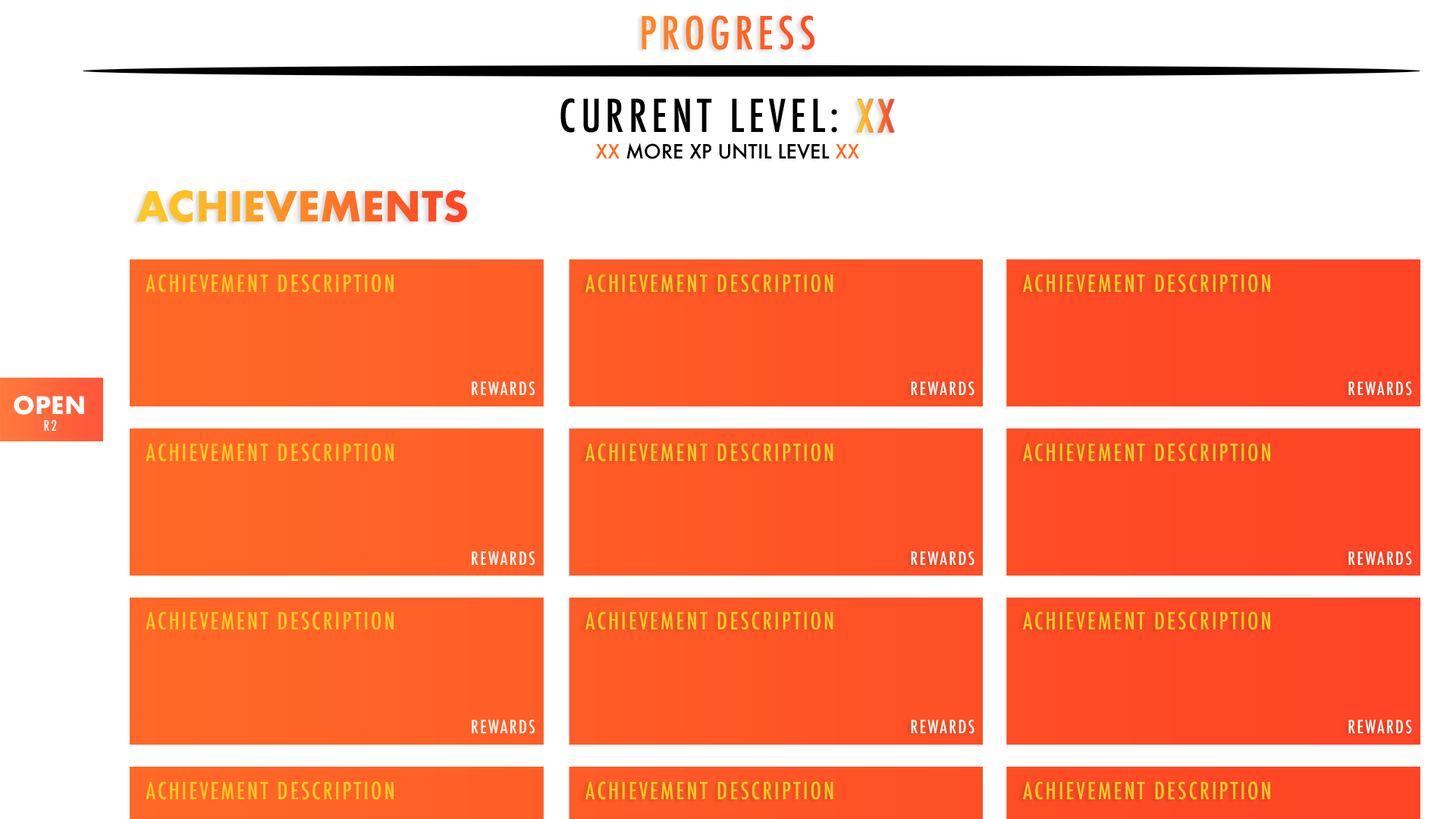
<style>
.page{position:relative;width:1456px;height:819px;background:#ffffff}
.page>*{position:absolute;margin:0}
.t1{font:44.2px "Futura-CondensedMedium";letter-spacing:0.1em}
.t2{font:44px "Futura-CondensedMedium";letter-spacing:0.1em;color:#000000}
.t3{font:44px "Futura-CondensedMedium";letter-spacing:0.1em;color:#939598}
.t4{font:44px "Futura-CondensedMedium";letter-spacing:0.1em}
.t5{font:19.1px "Futura-Medium";color:#000000}
.t6{font:19.1px "Futura-Medium";color:#ff6926}
.t7{font:19.1px "Futura-Medium";color:#ff6a27}
.t8{font:40.2px "Futura-Bold"}
.t9{font:23.1px "Futura-CondensedMedium";letter-spacing:0.1em;color:#ffca27}
.t10{font:17.8px "Futura-CondensedMedium";letter-spacing:0.1em;color:#ffffff}
.t11{font:23.6px "Futura-Bold";color:#ffffff}
.t12{font:14.1px "Futura-CondensedMedium";letter-spacing:0.1em;color:#ffffff}
</style>
<div class="page">
<p class="t1" style="left:642px;top:15px;width:173px;height:35px">PROGRESS</p>
<p class="t2" style="left:560px;top:98px;width:335px;height:35px">CURRENT LEVEL: <span class="t3">XX</span></p>
<p class="t4" style="left:857px;top:99px;width:37px;height:34px">XX</p>
<p class="t5" style="left:595px;top:143px;width:264px;height:17px"><span class="t6">XX</span> MORE XP UNTIL LEVEL <span class="t7">XX</span></p>
<p class="t8" style="left:136px;top:190px;width:331px;height:32px">ACHIEVEMENTS</p>
<p class="t9" style="left:146px;top:274px;width:248px;height:19px">ACHIEVEMENT DESCRIPTION</p>
<p class="t9" style="left:585px;top:274px;width:248px;height:19px">ACHIEVEMENT DESCRIPTION</p>
<p class="t9" style="left:1023px;top:274px;width:247px;height:19px">ACHIEVEMENT DESCRIPTION</p>
<p class="t10" style="left:472px;top:381px;width:63px;height:15px">REWARDS</p>
<p class="t10" style="left:911px;top:381px;width:63px;height:15px">REWARDS</p>
<p class="t10" style="left:1348px;top:381px;width:64px;height:15px">REWARDS</p>
<p class="t11" style="left:14px;top:396px;width:70px;height:19px">OPEN</p>
<p class="t12" style="left:44px;top:419px;width:13px;height:12px">R2</p>
<p class="t9" style="left:146px;top:443px;width:248px;height:19px">ACHIEVEMENT DESCRIPTION</p>
<p class="t9" style="left:585px;top:443px;width:248px;height:19px">ACHIEVEMENT DESCRIPTION</p>
<p class="t9" style="left:1023px;top:443px;width:247px;height:19px">ACHIEVEMENT DESCRIPTION</p>
<p class="t10" style="left:472px;top:551px;width:63px;height:15px">REWARDS</p>
<p class="t10" style="left:911px;top:551px;width:63px;height:15px">REWARDS</p>
<p class="t10" style="left:1348px;top:551px;width:64px;height:15px">REWARDS</p>
<p class="t9" style="left:146px;top:611px;width:248px;height:19px">ACHIEVEMENT DESCRIPTION</p>
<p class="t9" style="left:585px;top:611px;width:248px;height:19px">ACHIEVEMENT DESCRIPTION</p>
<p class="t9" style="left:1023px;top:611px;width:247px;height:19px">ACHIEVEMENT DESCRIPTION</p>
<p class="t10" style="left:472px;top:720px;width:63px;height:14px">REWARDS</p>
<p class="t10" style="left:911px;top:720px;width:63px;height:14px">REWARDS</p>
<p class="t10" style="left:1348px;top:720px;width:64px;height:14px">REWARDS</p>
<p class="t9" style="left:146px;top:781px;width:248px;height:19px">ACHIEVEMENT DESCRIPTION</p>
<p class="t9" style="left:585px;top:781px;width:248px;height:19px">ACHIEVEMENT DESCRIPTION</p>
<p class="t9" style="left:1023px;top:781px;width:247px;height:19px">ACHIEVEMENT DESCRIPTION</p>
</div>
